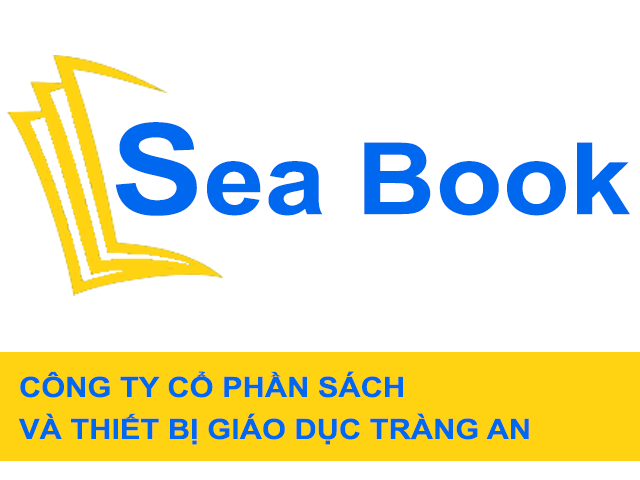
<style>
.page{position:relative;width:640px;height:480px;background:#ffffff}
.page>*{position:absolute;margin:0}
.t1{font:99.9px "Arial-BoldMT";color:#0068ef;scale:1.1 1}
.t2{font:126.3px "Arial-BoldMT";color:#0068ef;scale:1.1 1}
.t3{font:28px/42px "Arial-BoldMT";color:#0068ef;scale:1.1 1}
</style>
<div class="page">
<p class="t1" style="left:115px;top:122px;width:515px;height:94px"><span class="t2">S</span>ea Book</p>
<p class="t3" style="left:18px;top:371px;width:511px;height:74px;text-align:right">CÔNG TY CỔ PHẦN SÁCH <br>VÀ THIẾT BỊ GIÁO DỤC TRÀNG AN</p>
</div>
